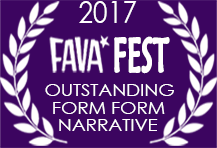
<style>
.page{position:relative;width:217px;height:148px;background:#3c0560}
.page>*{position:absolute;margin:0}
.t1{font:30.2px "CenturyGothic";color:#fefefe;scale:0.87 1}
.t2{font:47.5px "MaiandraGD-Regular";color:#fffefe;font-weight:bold;scale:0.55 1}
.t3{font:17.2px "CenturyGothic";color:#fffefe;scale:1.09 1}
</style>
<div class="page">
<p class="t1" style="left:79px;top:1px;width:58px;height:22px">2017</p>
<p class="t2" style="left:114px;top:36px;width:56px;height:38px">FEST</p>
<p class="t3" style="left:45px;top:84px;width:129px;height:12px">OUTSTANDING</p>
<p class="t3" style="left:53px;top:102px;width:112px;height:12px">FORM FORM</p>
<p class="t3" style="left:59px;top:119px;width:99px;height:12px">NARRATIVE</p>
</div>
